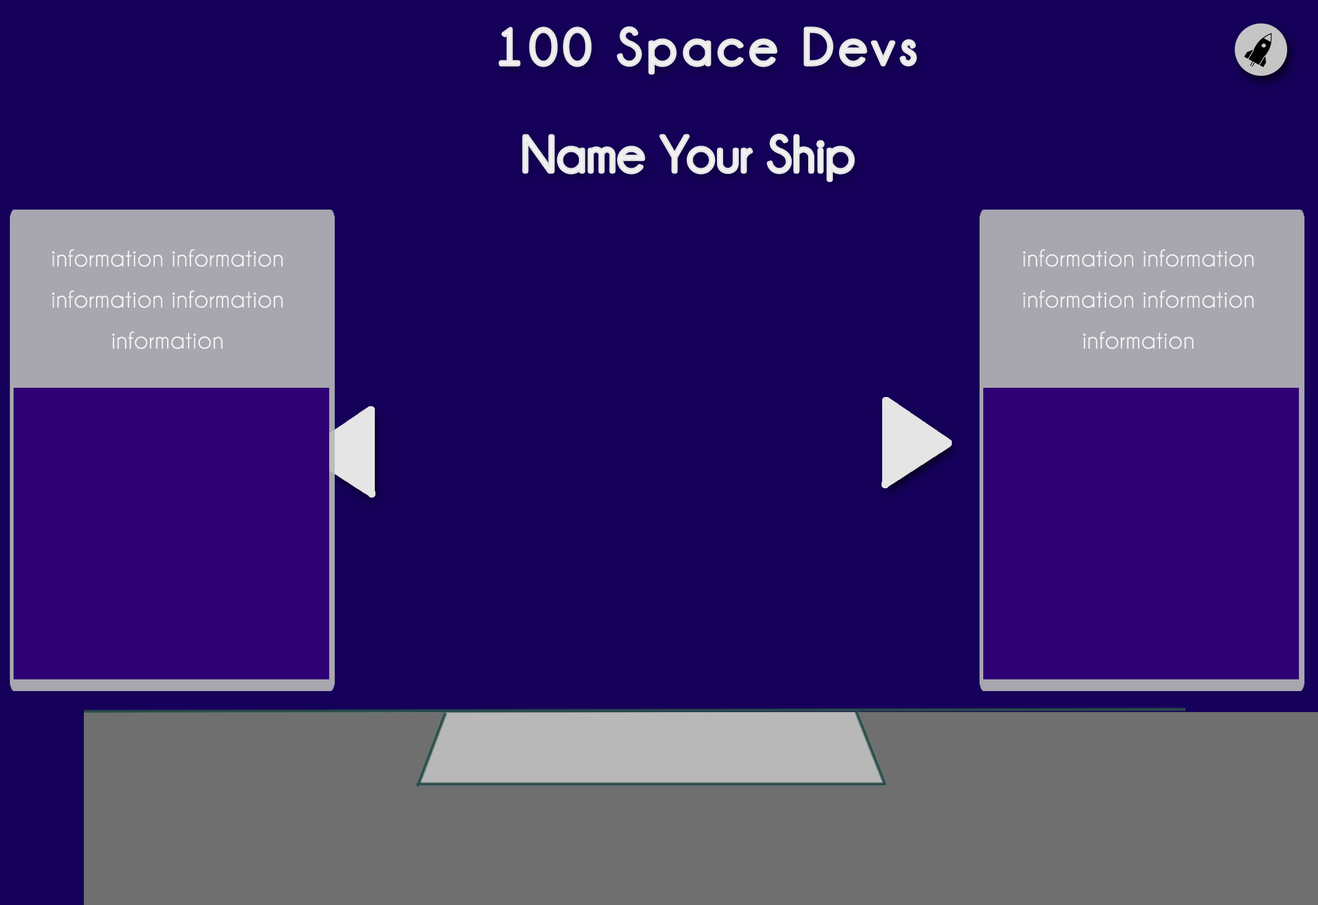
<style>
.page{position:relative;width:1318px;height:905px;background:#15005a}
.page>*{position:absolute;margin:0}
.t1{font:51.4px "Champagne&Limousines";letter-spacing:0.11em;color:#f1f1f1;font-weight:bold}
.t2{font:51.4px "Champagne&Limousines";letter-spacing:0.01em;color:#f2f2f2;font-weight:bold}
.t3{font:25.7px/41.1px "Champagne&Limousines";letter-spacing:0.01em;color:#f2f2f2;font-weight:bold}
</style>
<div class="page">
<p class="t1" style="left:501px;top:28px;width:414px;height:45px">100 Space Devs</p>
<p class="t2" style="left:524px;top:135px;width:329px;height:46px">Name Your Ship</p>
<p class="t3" style="left:52px;top:249px;width:231px;height:100px;text-align:center">information information information information information</p>
<p class="t3" style="left:1023px;top:249px;width:231px;height:100px;text-align:center">information information information information information</p>
</div>
